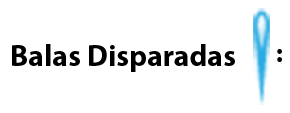
<style>
.page{position:relative;width:290px;height:113px;background:#ffffff}
.page>*{position:absolute;margin:0}
.t1{font:30px "MyriadPro-Bold";color:#000000}
.t2{font:26.8px "MyriadPro-Bold";color:#000000}
</style>
<div class="page">
<p class="t1" style="left:12px;top:44px;width:223px;height:28px">Balas Disparadas</p>
<p class="t2" style="left:277px;top:49px;width:5px;height:13px">:</p>
</div>
